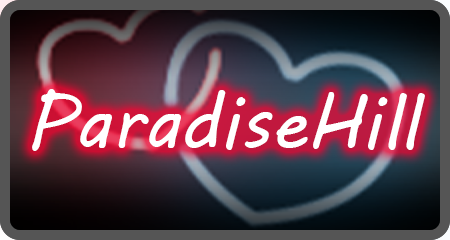
<style>
.page{position:relative;width:450px;height:240px}
.page>*{position:absolute;margin:0}
.t1{font:75px "MVBoli";color:#ffffff}
</style>
<div class="page">
<p class="t1" style="left:32px;top:89px;width:393px;height:62px">ParadiseHill</p>
</div>
